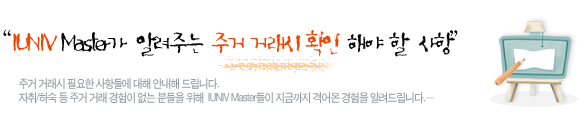
<style>
.page{position:relative;width:582px;height:128px;background:#ffffff}
.page>*{position:absolute;margin:0}
.t1{font:30px "SanKbL";letter-spacing:-0.15em;color:#070707}
.t2{font:30px "SanKbL";letter-spacing:-0.15em;color:#202020}
.t3{font:30px "SanKbL";letter-spacing:-0.15em;color:#f14400}
.t4{font:12px/14px "SandArB";letter-spacing:-0.075em;color:#969b9f;scale:0.9 1}
</style>
<div class="page">
<p class="t1" style="left:3px;top:29px;width:455px;height:28px"><span class="t2"> </span>“ <span class="t3">IUNIV</span>  Master가    알려주는   <span class="t3">주거  거래시  확인   </span>해야   할    사항”</p>
<p class="t4" style="left:18px;top:78px;width:416px;height:25px">주거 거래시 필요한 사항들에 대해 안내해 드립니다.<br>자취/하숙 등 주거 거래 경험이 없는 분들을 위해  IUNIV Master들이 지금까지 격어온 경험을 알려드립니다.ㅡ</p>
</div>
